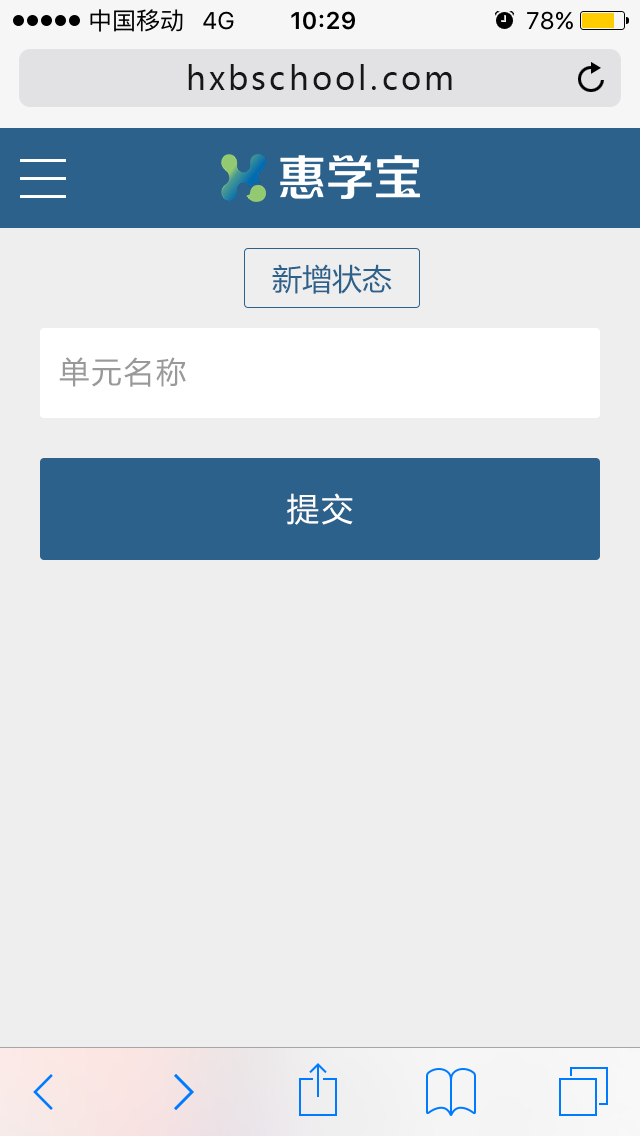
<style>
.page{position:relative;width:640px;height:1136px;background:#eeeeee}
.page>*{position:absolute;margin:0}
.t1{font:32px "MicrosoftYaHei";letter-spacing:0.1em;color:#171717}
.t2{font:30px "MicrosoftYaHei";color:#2c618b}
.t3{font:30px "MicrosoftYaHei";letter-spacing:0.075em;color:#999999}
.t4{font:32px "MicrosoftYaHei";letter-spacing:0.075em;color:#ffffff}
</style>
<div class="page">
<p class="t1" style="left:188px;top:64px;width:264px;height:26px">hxbschool.com</p>
<p class="t2" style="left:272px;top:264px;width:120px;height:30px">新增状态</p>
<p class="t3" style="left:59px;top:357px;width:127px;height:30px">单元名称</p>
<p class="t4" style="left:287px;top:493px;width:66px;height:32px">提交</p>
</div>
